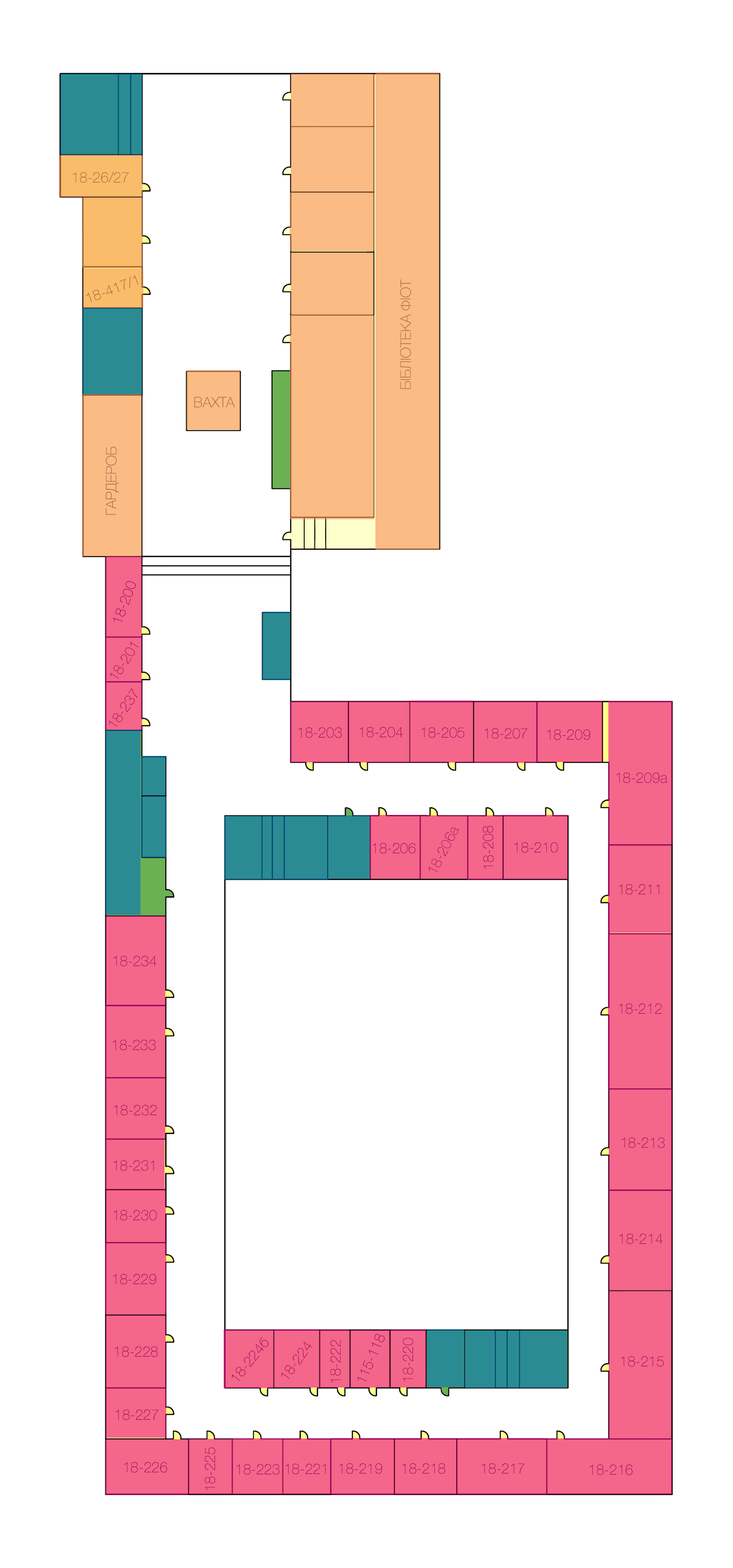
<style>
.page{position:relative;width:733px;height:1568px;background:#ffffff}
.page>*{position:absolute;margin:0}
.t1{font:14.4px "HelveticaNeue-Thin";color:#965834}
.t2{font:14.4px "HelveticaNeue-Thin";color:#900354}
</style>
<div class="page">
<p class="t1" style="left:73px;top:172px;width:56px;height:11px">18-26/27</p>
<p class="t1" style="left:86px;top:275px;width:52px;height:28px;rotate:-21deg">18-417/1</p>
<p class="t1" style="left:400px;top:279px;width:11px;height:110px;rotate:-90deg">БІБЛІОТЕКА ФІОТ</p>
<p class="t1" style="left:194px;top:397px;width:41px;height:10px">ВАХТА</p>
<p class="t1" style="left:105px;top:446px;width:14px;height:69px;rotate:-90deg">ГАРДЕРОБ</p>
<p class="t2" style="left:113px;top:581px;width:23px;height:41px;rotate:-70deg">18-200</p>
<p class="t2" style="left:110px;top:642px;width:29px;height:37px;rotate:-57deg">18-201</p>
<p class="t2" style="left:109px;top:688px;width:29px;height:39px;rotate:-56deg">18-237</p>
<p class="t2" style="left:299px;top:727px;width:43px;height:11px">18-203</p>
<p class="t2" style="left:360px;top:727px;width:43px;height:11px">18-204</p>
<p class="t2" style="left:422px;top:727px;width:42px;height:11px">18-205</p>
<p class="t2" style="left:485px;top:728px;width:42px;height:11px">18-207</p>
<p class="t2" style="left:547px;top:729px;width:44px;height:11px">18-209</p>
<p class="t2" style="left:617px;top:773px;width:51px;height:10px">18-209а</p>
<p class="t2" style="left:428px;top:827px;width:31px;height:45px;rotate:-63deg">18-206а</p>
<p class="t2" style="left:483px;top:826px;width:11px;height:43px;rotate:-91deg">18-208</p>
<p class="t2" style="left:373px;top:843px;width:43px;height:11px">18-206</p>
<p class="t2" style="left:514px;top:842px;width:44px;height:11px">18-210</p>
<p class="t2" style="left:619px;top:884px;width:40px;height:11px">18-211</p>
<p class="t2" style="left:114px;top:956px;width:43px;height:10px">18-234</p>
<p class="t2" style="left:619px;top:1004px;width:43px;height:10px">18-212</p>
<p class="t2" style="left:113px;top:1040px;width:43px;height:10px">18-233</p>
<p class="t2" style="left:114px;top:1105px;width:43px;height:11px">18-232</p>
<p class="t2" style="left:622px;top:1138px;width:43px;height:10px">18-213</p>
<p class="t2" style="left:114px;top:1160px;width:40px;height:11px">18-231</p>
<p class="t2" style="left:114px;top:1210px;width:43px;height:11px">18-230</p>
<p class="t2" style="left:619px;top:1234px;width:44px;height:10px">18-214</p>
<p class="t2" style="left:113px;top:1274px;width:43px;height:11px">18-229</p>
<p class="t2" style="left:231px;top:1337px;width:38px;height:44px;rotate:-51deg">18-224б</p>
<p class="t2" style="left:357px;top:1334px;width:28px;height:47px;rotate:-67deg">115-118</p>
<p class="t2" style="left:403px;top:1338px;width:10px;height:43px;rotate:-90deg">18-220</p>
<p class="t2" style="left:115px;top:1346px;width:43px;height:11px">18-228</p>
<p class="t2" style="left:281px;top:1342px;width:31px;height:37px;rotate:-55deg">18-224</p>
<p class="t2" style="left:330px;top:1340px;width:11px;height:43px;rotate:-90deg">18-222</p>
<p class="t2" style="left:621px;top:1356px;width:43px;height:11px">18-215</p>
<p class="t2" style="left:116px;top:1410px;width:42px;height:10px">18-227</p>
<p class="t2" style="left:205px;top:1447px;width:10px;height:43px;rotate:-90deg">18-225</p>
<p class="t2" style="left:124px;top:1462px;width:43px;height:11px">18-226</p>
<p class="t2" style="left:237px;top:1464px;width:42px;height:11px">18-223</p>
<p class="t2" style="left:285px;top:1464px;width:41px;height:10px">18-221</p>
<p class="t2" style="left:339px;top:1463px;width:43px;height:11px">18-219</p>
<p class="t2" style="left:402px;top:1463px;width:44px;height:11px">18-218</p>
<p class="t2" style="left:482px;top:1463px;width:43px;height:11px">18-217</p>
<p class="t2" style="left:590px;top:1465px;width:43px;height:10px">18-216</p>
</div>
